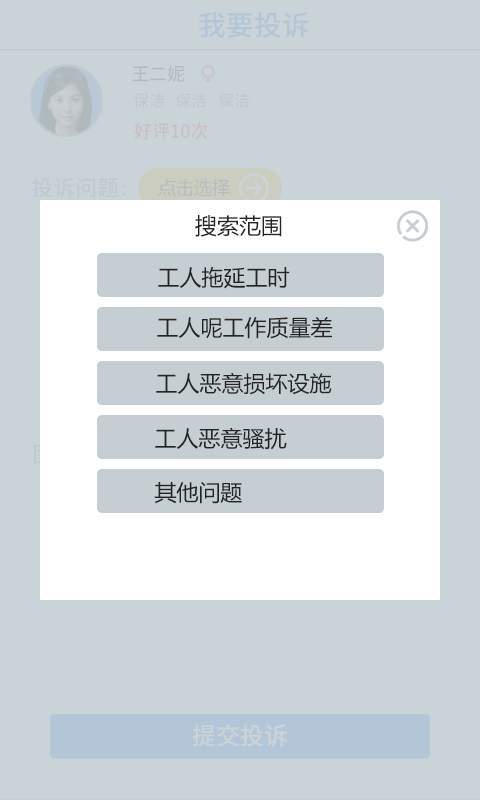
<style>
.page{position:relative;width:480px;height:800px;background:#cad3d8}
.page>*{position:absolute;margin:0}
.t1{font:28px "NotoSansHans-Medium";color:#b3c6d8}
.t2{font:18.3px "NotoSansHans-Medium";color:#b3bbc0}
.t3{font:16px "NotoSansHans-Medium";color:#c0c9cd}
.t4{font:18px "NotoSansHans-Medium";color:#cabec5}
.t5{font:22px "NotoSansHans-Medium";color:#c0c9cd}
.t6{font:18px "NotoSansHans-Medium";color:#c0c9cd}
.t7{font:22px "MicrosoftYaHei";color:#252323}
.t8{font:24px "NotoSansHans-Medium";color:#cad3d8}
</style>
<div class="page">
<p class="t1" style="left:198px;top:12px;width:111px;height:26px">我要投诉</p>
<p class="t2" style="left:132px;top:65px;width:53px;height:17px">王二妮</p>
<p class="t3" style="left:133px;top:93px;width:32px;height:15px">保洁</p>
<p class="t3" style="left:175px;top:93px;width:32px;height:15px">保洁</p>
<p class="t3" style="left:218px;top:93px;width:32px;height:15px">保洁</p>
<p class="t4" style="left:134px;top:122px;width:74px;height:18px">好评10次</p>
<p class="t5" style="left:32px;top:177px;width:94px;height:21px">投诉问题<span class="t6">：</span></p>
<p class="t7" style="left:195px;top:215px;width:87px;height:22px">搜索范围</p>
<p class="t7" style="left:158px;top:266px;width:132px;height:23px">工人拖延工时</p>
<p class="t7" style="left:157px;top:316px;width:176px;height:23px">工人呢工作质量差</p>
<p class="t7" style="left:156px;top:372px;width:176px;height:23px">工人恶意损坏设施</p>
<p class="t7" style="left:155px;top:427px;width:132px;height:23px">工人恶意骚扰</p>
<p class="t7" style="left:154px;top:481px;width:88px;height:23px">其他问题</p>
<p class="t8" style="left:192px;top:724px;width:95px;height:23px">提交投诉</p>
</div>
